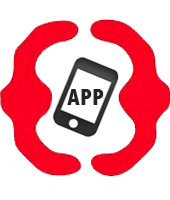
<style>
.page{position:relative;width:170px;height:200px;background:#ffffff}
.page>*{position:absolute;margin:0}
.t1{font:24px "TwCenMT-CondensedExtraBold";color:#252525}
</style>
<div class="page">
<p class="t1" style="left:67px;top:89px;width:37px;height:16px">APP</p>
</div>
